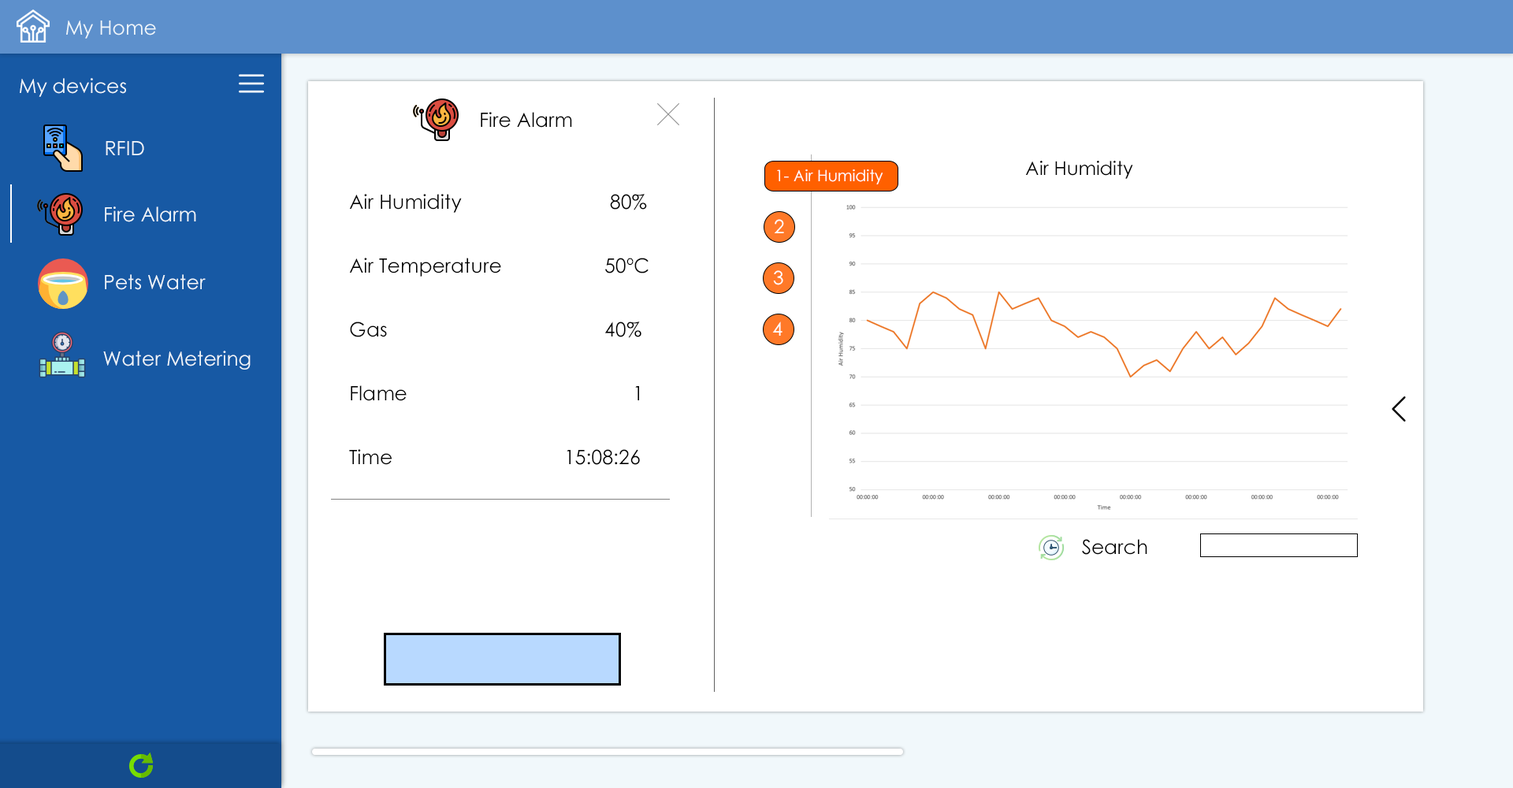
<style>
.page{position:relative;width:1513px;height:788px;background:#ffffff}
.page>*{position:absolute;margin:0}
.t1{font:19.7px "CenturyGothic";color:#f0f7fb}
.t2{font:19.7px "CenturyGothic";color:#000101}
.t3{font:18.9px "CenturyGothic";color:#010000}
.t4{font:15.8px "CenturyGothic";color:#ffffff}
.t5{font:19.7px/63px "CenturyGothic";color:#000000}
.t6{font:18.9px "CenturyGothic";color:#ffffff}
.t7{font:19.7px "CenturyGothic";color:#000000}
</style>
<div class="page">
<p class="t1" style="left:66px;top:20px;width:90px;height:19px">My Home</p>
<p class="t1" style="left:20px;top:78px;width:106px;height:19px">My devices</p>
<p class="t2" style="left:481px;top:112px;width:91px;height:16px">Fire Alarm</p>
<p class="t1" style="left:106px;top:141px;width:38px;height:14px">RFID</p>
<p class="t3" style="left:1025px;top:161px;width:108px;height:18px">Air Humidity</p>
<p class="t4" style="left:777px;top:169px;width:106px;height:15px">1- Air Humidity</p>
<p class="t5" style="left:349px;top:194px;width:300px;height:271px">Air Humidity       80%<br>Air Temperature    50ºC<br>Gas        40%<br>Flame        1<br>Time         15:08:26</p>
<p class="t1" style="left:105px;top:206px;width:91px;height:16px">Fire Alarm</p>
<p class="t6" style="left:774px;top:219px;width:10px;height:14px">2</p>
<p class="t1" style="left:105px;top:274px;width:101px;height:16px">Pets Water</p>
<p class="t6" style="left:773px;top:270px;width:10px;height:15px">3</p>
<p class="t6" style="left:772px;top:322px;width:11px;height:14px">4</p>
<p class="t1" style="left:103px;top:351px;width:148px;height:19px">Water Metering</p>
<p class="t7" style="left:1082px;top:539px;width:65px;height:16px">Search</p>
</div>
